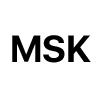
<style>
.page{position:relative;width:100px;height:100px;background:#ffffff}
.page>*{position:absolute;margin:0}
.t1{font:37.5px "SFProDisplay-Bold";color:#000000}
</style>
<div class="page">
<p class="t1" style="left:12px;top:35px;width:79px;height:28px">MSK</p>
</div>
